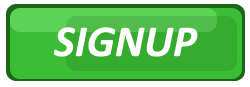
<style>
.page{position:relative;width:250px;height:87px;background:#35ab2f}
.page>*{position:absolute;margin:0}
.t1{font:44.4px "Calibri-BoldItalic";color:#fefefd}
</style>
<div class="page">
<p class="t1" style="left:53px;top:27px;width:145px;height:30px">SIGNUP</p>
</div>
